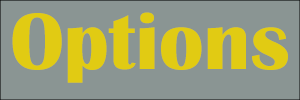
<style>
.page{position:relative;width:300px;height:100px;background:#8a9593}
.page>*{position:absolute;margin:0}
.t1{font:82.8px "BritannicBold";color:#e1cb13}
</style>
<div class="page">
<p class="t1" style="left:12px;top:12px;width:276px;height:71px">Options</p>
</div>
